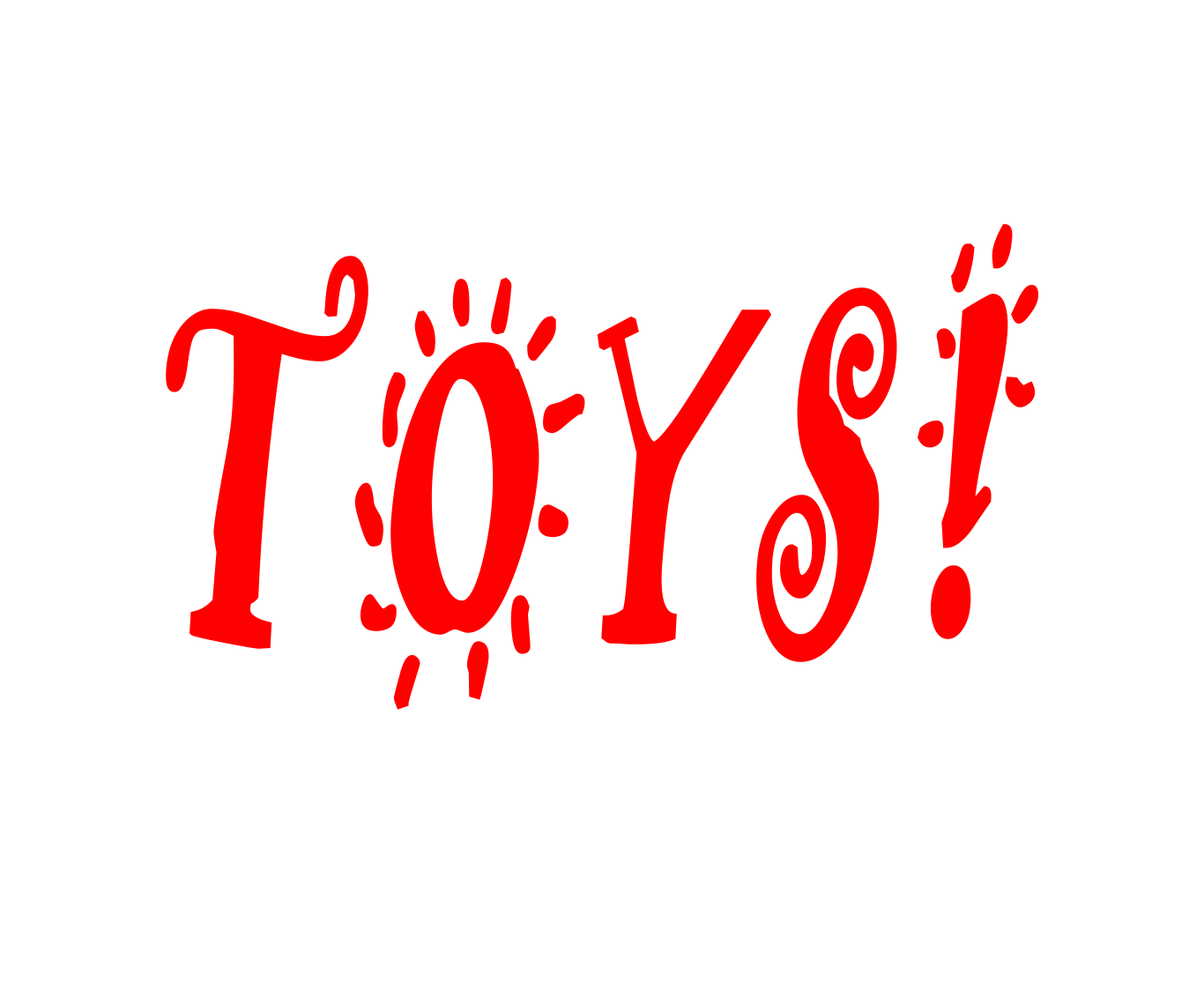
<style>
.page{position:relative;width:1204px;height:991px;background:#ffffff}
.page>*{position:absolute;margin:0}
.t1{font:506.9px "ARHERMANN";color:#ff0000;text-transform:uppercase;font-weight:bold;font-style:italic;scale:0.5 1}
</style>
<div class="page">
<p class="t1" style="left:166px;top:224px;width:872px;height:485px">Toys!</p>
</div>
